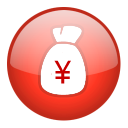
<style>
.page{position:relative;width:128px;height:128px;background:#ffffff}
.page>*{position:absolute;margin:0}
.t1{font:30px "MicrosoftYaHei";letter-spacing:0.02em;color:#c80000}
</style>
<div class="page">
<p class="t1" style="left:54px;top:60px;width:17px;height:24px">￥</p>
</div>
